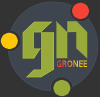
<style>
.page{position:relative;width:100px;height:97px;background:#3e454f}
.page>*{position:absolute;margin:0}
.t1{font:8.9px "Muli-Bold";color:#fdc509;scale:0.82 1}
</style>
<div class="page">
<p class="t1" style="left:56px;top:60px;width:31px;height:7px">GRONEE</p>
</div>
